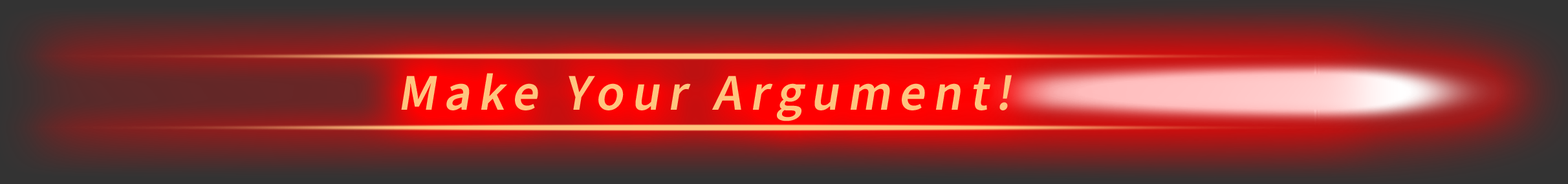
<style>
.page{position:relative;width:1568px;height:184px}
.page>*{position:absolute;margin:0}
.t1{font:52.4px "SourceSansRoman-Semibold";letter-spacing:0.15em;color:#ffc47f}
</style>
<div class="page">
<p class="t1" style="left:401px;top:73px;width:611px;height:49px">Make Your Argument!</p>
</div>
